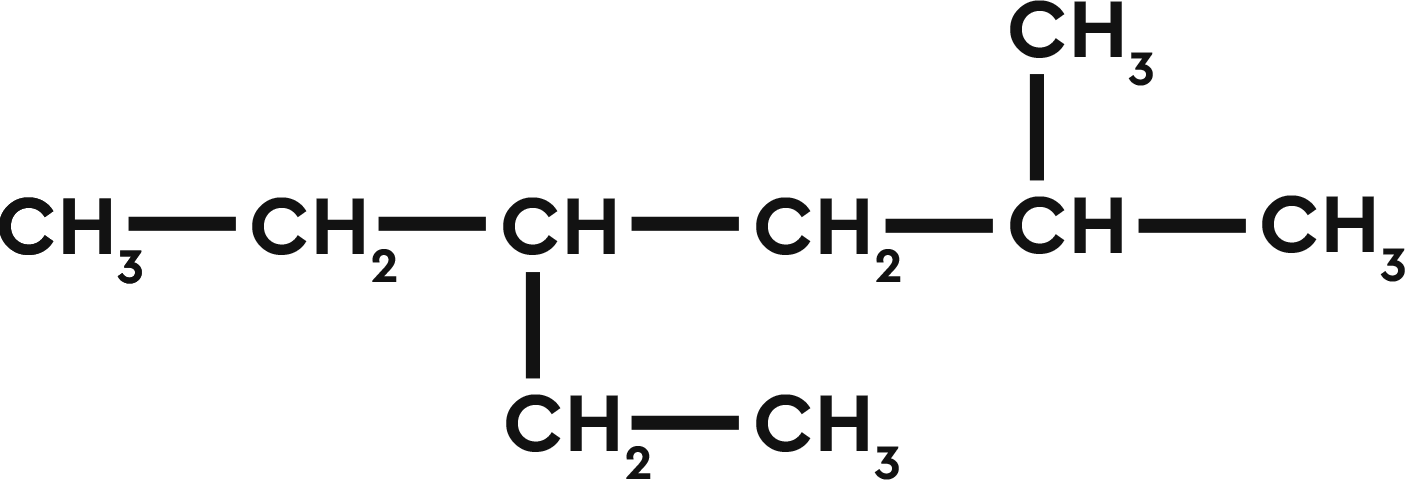
<style>
.page{position:relative;width:1407px;height:480px;background:#ffffff}
.page>*{position:absolute;margin:0}
.t1{font:84.4px "CeraPro-Bold";color:#121212}
.t2{font:124.3px "CeraPro-Bold";color:#121212}
</style>
<div class="page">
<p class="t1" style="left:1010px;top:0px;width:143px;height:86px">CH3</p>
<p class="t2" style="left:1029px;top:74px;width:15px;height:107px;rotate:-90deg">----</p>
<p class="t1" style="left:0px;top:197px;width:142px;height:87px">CH3</p>
<p class="t1" style="left:0px;top:197px;width:142px;height:87px">CH3</p>
<p class="t1" style="left:252px;top:197px;width:145px;height:85px">CH2</p>
<p class="t1" style="left:503px;top:197px;width:112px;height:58px">CH</p>
<p class="t1" style="left:756px;top:197px;width:145px;height:85px">CH2</p>
<p class="t1" style="left:1010px;top:196px;width:112px;height:58px">CH</p>
<p class="t1" style="left:1262px;top:195px;width:143px;height:87px">CH3</p>
<p class="t2" style="left:128px;top:216px;width:108px;height:15px">----</p>
<p class="t2" style="left:378px;top:216px;width:108px;height:15px">----</p>
<p class="t2" style="left:631px;top:216px;width:108px;height:15px">----</p>
<p class="t2" style="left:885px;top:218px;width:108px;height:15px">----</p>
<p class="t2" style="left:1138px;top:218px;width:108px;height:15px">----</p>
<p class="t2" style="left:525px;top:272px;width:15px;height:107px;rotate:-90deg">----</p>
<p class="t1" style="left:506px;top:394px;width:145px;height:85px">CH2</p>
<p class="t1" style="left:756px;top:394px;width:143px;height:86px">CH3</p>
<p class="t2" style="left:631px;top:415px;width:108px;height:15px">----</p>
</div>
